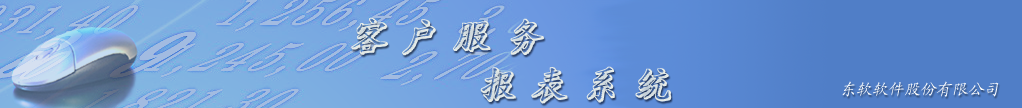
<style>
.page{position:relative;width:1022px;height:108px}
.page>*{position:absolute;margin:0}
.t1{font:40px "ChrluenEG-Medium-GB";color:#e1e7e4;font-style:italic}
.t2{font:16px "KaiTi_GB2312";color:#fafafb;font-style:italic}
</style>
<div class="page">
<p class="t1" style="left:351px;top:17px;width:321px;height:87px">客 户 服 务 <br>           报 表 系 统</p>
<p class="t2" style="left:842px;top:81px;width:157px;height:16px">东软软件股份有限公司</p>
</div>
